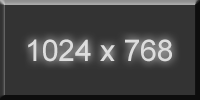
<style>
.page{position:relative;width:200px;height:100px;background:#333333}
.page>*{position:absolute;margin:0}
.t1{font:30px "ArialMT";color:#dddddd}
</style>
<div class="page">
<p class="t1" style="left:28px;top:39px;width:144px;height:23px">1024 x 768</p>
</div>
